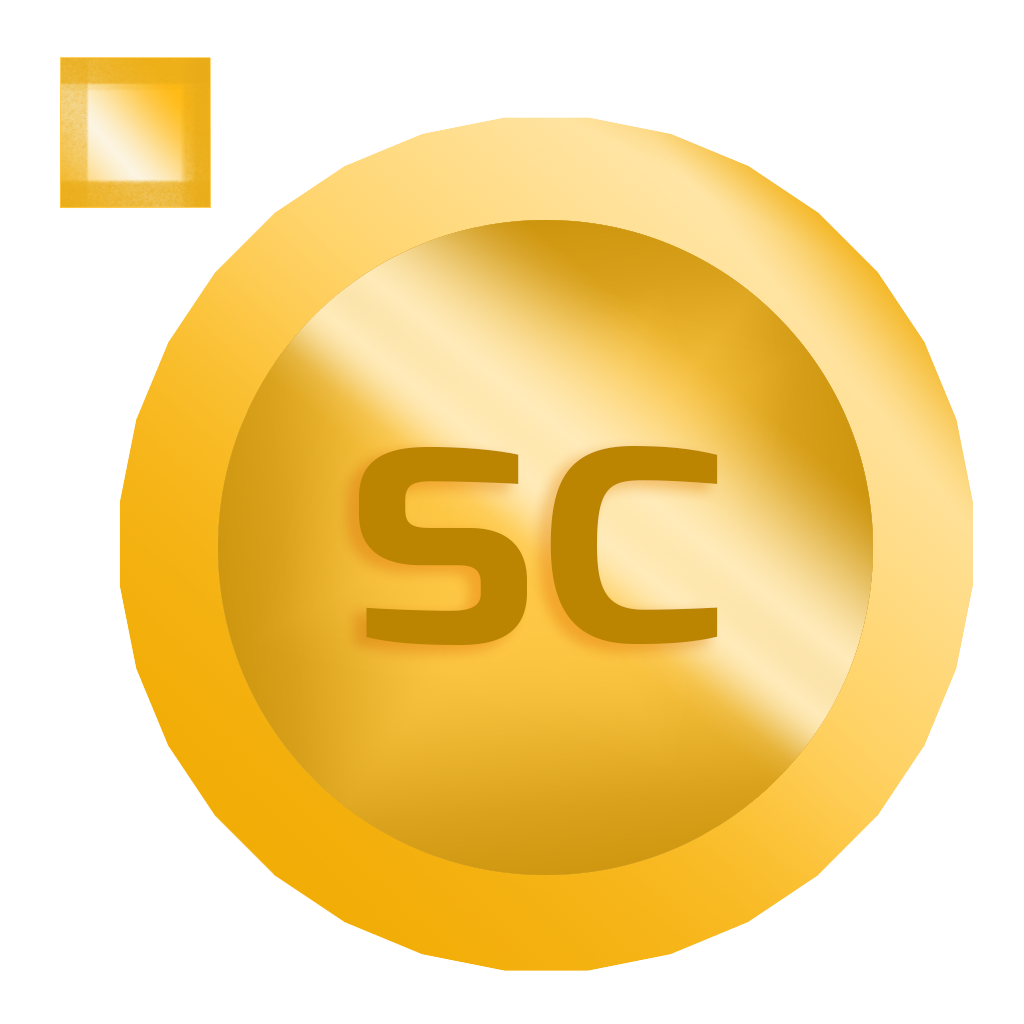
<style>
.page{position:relative;width:1024px;height:1024px;background:#ffffff}
.page>*{position:absolute;margin:0}
.t1{font:266.2px "Exo-Bold";color:#bb8502;scale:1.24 1}
</style>
<div class="page">
<p class="t1" style="left:359px;top:446px;width:359px;height:199px">SC</p>
</div>
